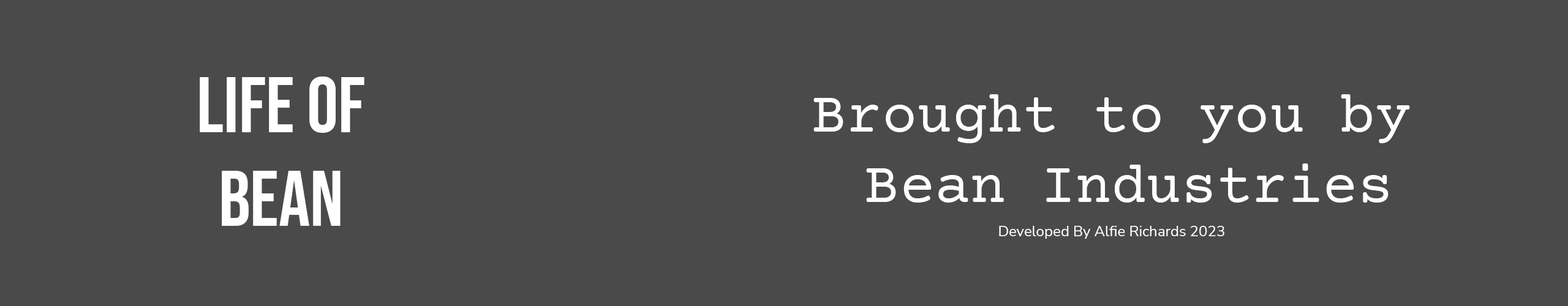
<style>
.page{position:relative;width:1568px;height:306px;background:#4a4a4a}
.page>*{position:absolute;margin:0}
.t1{font:78.4px "BebasNeue-Regular";color:#ffffff}
.t2{font:58.8px "CourierPrime-Regular";color:#ffffff}
.t3{font:14.7px "NunitoSans-Regular";color:#ffffff}
</style>
<div class="page">
<p class="t1" style="left:200px;top:77px;width:164px;height:149px;text-align:center">Life of<br>bean</p>
<p class="t2" style="left:813px;top:94px;width:597px;height:109px;text-align:center">Brought to you by<br> Bean Industries</p>
<p class="t3" style="left:999px;top:226px;width:225px;height:13px">Developed By Alfie Richards 2023</p>
</div>
